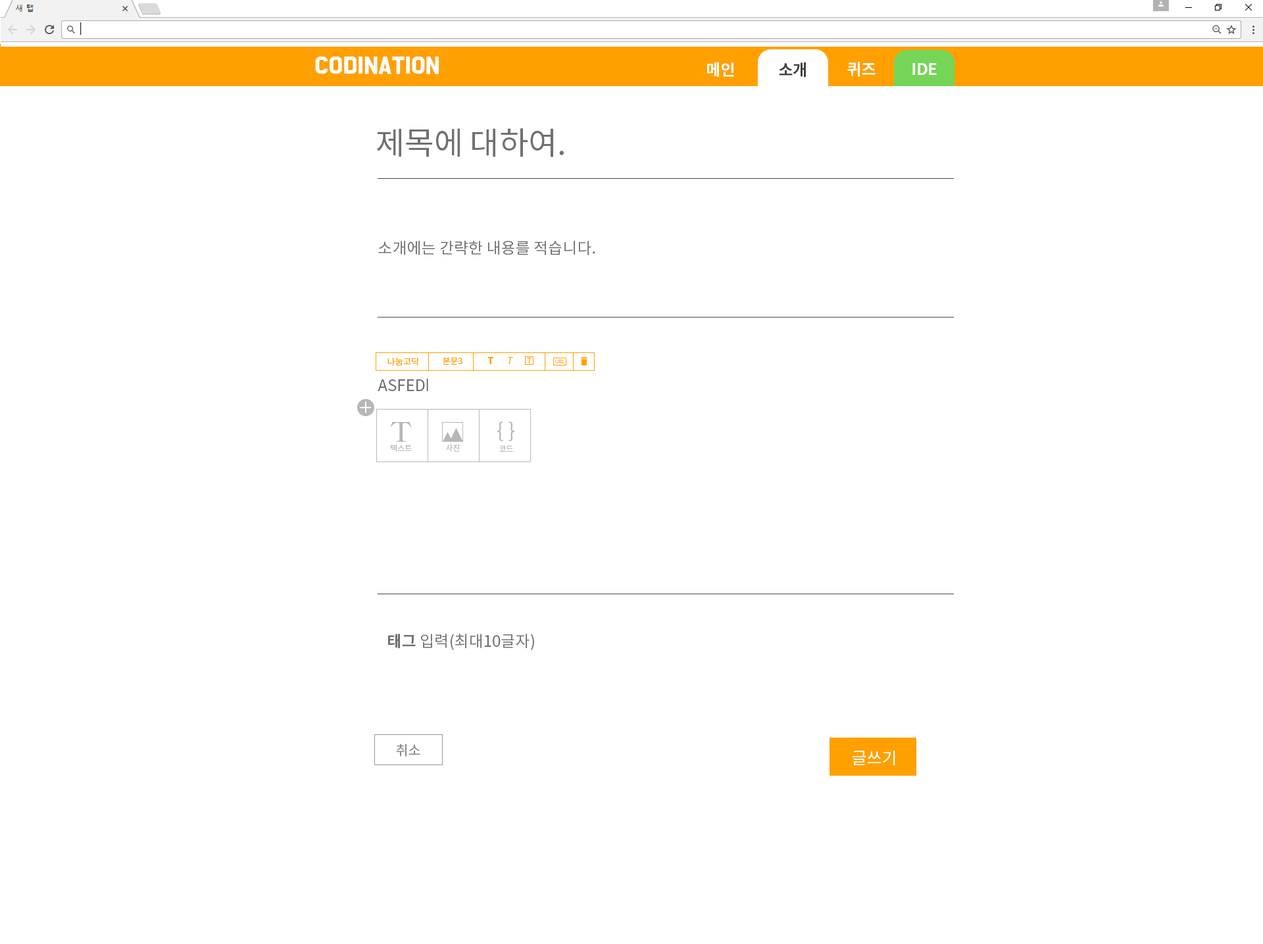
<style>
.page{position:relative;width:1263px;height:944px;background:#ffffff}
.page>*{position:absolute;margin:0}
.t1{font:19.7px "BMDoHyeon";color:#ffffff;font-weight:bold}
.t2{font:15.8px "NotoSansCJKkr-Bold";color:#ffffff}
.t3{font:15.8px "NotoSansCJKkr-Bold";color:#424242}
.t4{font:31.6px "NotoSansCJKkr-Regular";color:#707070}
.t5{font:15.8px "NotoSansCJKkr-Regular";color:#707070}
.t6{font:8.7px "NotoSansCJKkr-Regular";color:#ffa000}
.t7{font:8.4px "NotoSansCJKkr-Regular";color:#ffa000}
.t8{font:9.6px "NotoSansCJKkr-Black";color:#ffa000}
.t9{font:9.6px "NotoSansCJKkr-Light";color:#ffa000;font-style:italic}
.t10{font:8.1px "NotoSansCJKkr-Light";color:#ffa000}
.t11{font:5.3px "NotoSansCJKkr-Light";color:#ffa000}
.t12{font:27px "HYmjrE";color:#b7b7b7}
.t13{font:20.4px "NotoSansCJKkr-Regular";color:#b7b7b7}
.t14{font:8.1px "NotoSansCJKkr-Regular";color:#b7b7b7}
.t15{font:15.8px "NotoSansCJKkr-Bold";color:#707070}
.t16{font:13.7px "NotoSansCJKkr-Regular";color:#898989}
.t17{font:16.4px "NotoSansCJKkr-Regular";color:#ffffff}
</style>
<div class="page">
<p class="t1" style="left:315px;top:57px;width:124px;height:17px">CODINATION</p>
<p class="t2" style="left:707px;top:62px;width:27px;height:15px">메인</p>
<p class="t3" style="left:779px;top:62px;width:27px;height:16px">소개</p>
<p class="t2" style="left:847px;top:62px;width:28px;height:15px">퀴즈</p>
<p class="t2" style="left:912px;top:63px;width:24px;height:12px">IDE</p>
<p class="t4" style="left:377px;top:128px;width:187px;height:29px">제목에 대하여.</p>
<p class="t5" style="left:378px;top:241px;width:217px;height:14px">소개에는 간략한 내용를 적습니다.</p>
<p class="t6" style="left:387px;top:358px;width:31px;height:8px">나눔고딕</p>
<p class="t7" style="left:443px;top:357px;width:19px;height:8px">본문3</p>
<p class="t8" style="left:487px;top:357px;width:6px;height:7px">T</p>
<p class="t9" style="left:508px;top:357px;width:6px;height:7px">T</p>
<p class="t10" style="left:527px;top:358px;width:4px;height:6px">T</p>
<p class="t11" style="left:555px;top:360px;width:10px;height:4px">URL</p>
<p class="t5" style="left:377px;top:379px;width:48px;height:12px">ASFED</p>
<p class="t12" style="left:390px;top:422px;width:22px;height:20px">T</p>
<p class="t13" style="left:497px;top:422px;width:17px;height:19px">{ }</p>
<p class="t14" style="left:391px;top:445px;width:21px;height:7px">텍스트</p>
<p class="t14" style="left:446px;top:444px;width:14px;height:8px">사진</p>
<p class="t14" style="left:499px;top:446px;width:14px;height:6px">코드</p>
<p class="t5" style="left:388px;top:634px;width:146px;height:16px"><span class="t15">태그</span> 입력(최대10글자)</p>
<p class="t16" style="left:396px;top:744px;width:24px;height:13px">취소</p>
<p class="t17" style="left:852px;top:750px;width:43px;height:16px">글쓰기</p>
</div>
